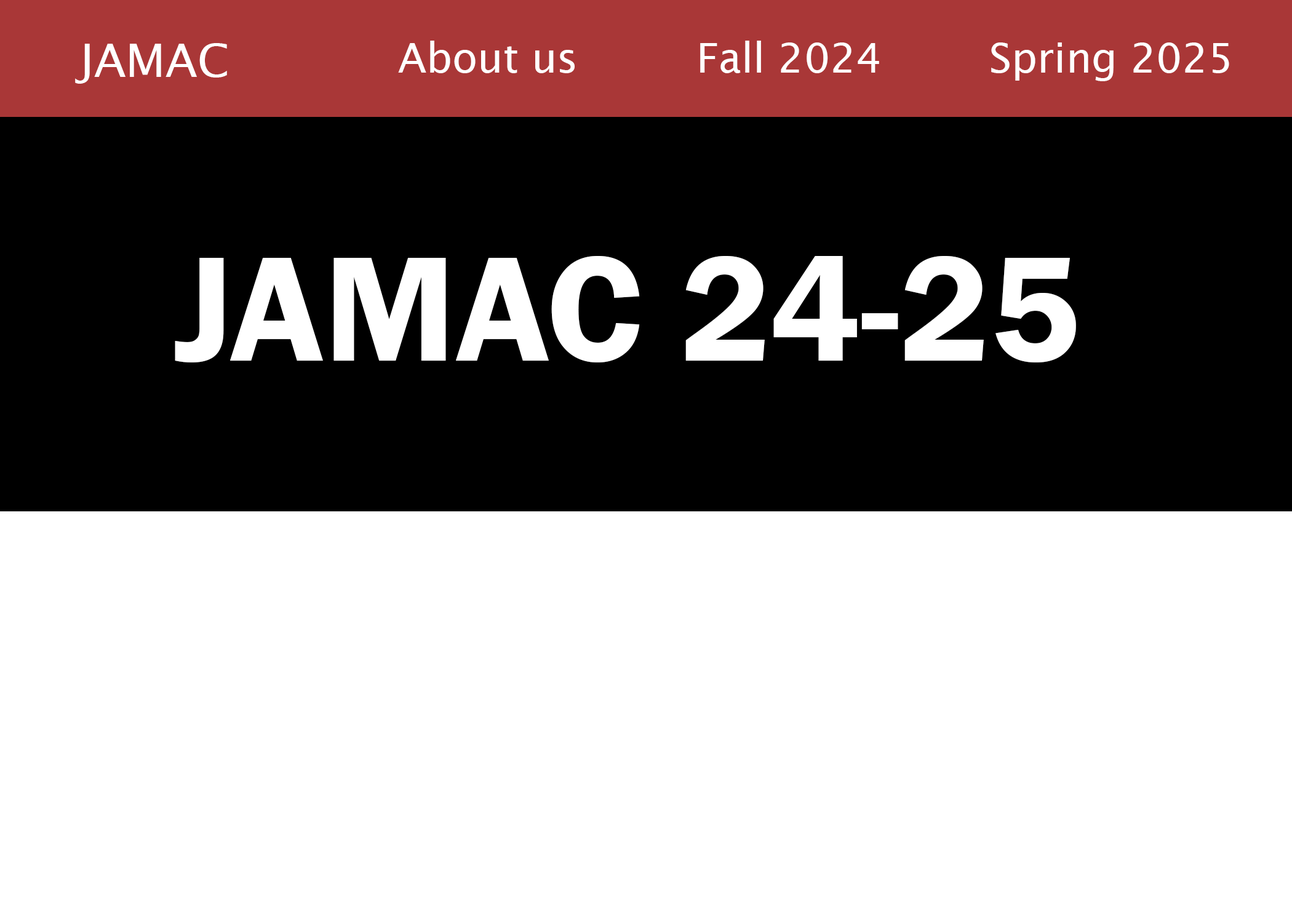
<style>
.page{position:relative;width:1292px;height:923px;background:#ffffff}
.page>*{position:absolute;margin:0}
.t1{font:41px "LucidaSans";color:#ffffff}
.t2{font:46.1px "LucidaSans";color:#ffffff}
.t3{font:153.8px "FranklinGothic-Demi";color:#ffffff}
</style>
<div class="page">
<p class="t1" style="left:398px;top:41px;width:177px;height:32px">About us</p>
<p class="t1" style="left:700px;top:41px;width:179px;height:32px">Fall 2024</p>
<p class="t2" style="left:75px;top:43px;width:152px;height:41px">JAMAC</p>
<p class="t1" style="left:991px;top:42px;width:238px;height:39px">Spring 2025</p>
<p class="t3" style="left:175px;top:256px;width:901px;height:106px">JAMAC 24-25</p>
</div>
